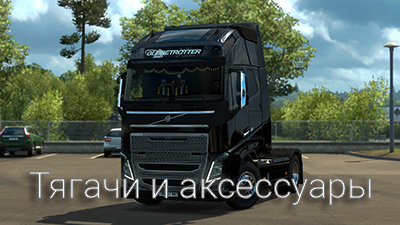
<style>
.page{position:relative;width:400px;height:225px}
.page>*{position:absolute;margin:0}
.t1{font:36px "Roboto-Light"}
</style>
<div class="page">
<p class="t1" style="left:29px;top:172px;width:342px;height:33px">Тягачи и аксессуары</p>
</div>
